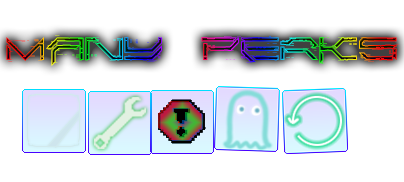
<style>
.page{position:relative;width:404px;height:182px;background:#ffffff}
.page>*{position:absolute;margin:0}
.t1{font:30px "Corruptor-LDR"}
</style>
<div class="page">
<p class="t1" style="left:6px;top:35px;width:393px;height:31px">Many PerkS</p>
</div>
